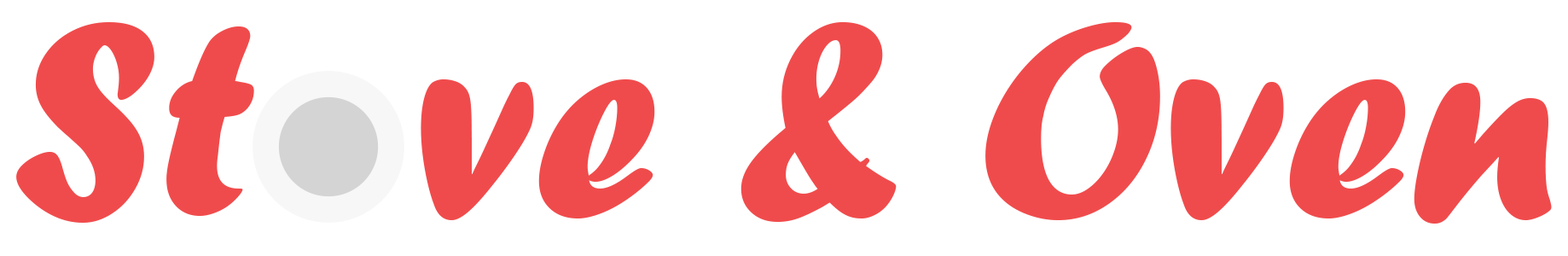
<style>
.page{position:relative;width:1568px;height:256px;background:#ffffff}
.page>*{position:absolute;margin:0}
.t1{font:291.2px "ForteMT";color:#f04b4c}
</style>
<div class="page">
<p class="t1" style="left:16px;top:22px;width:1536px;height:202px">St  ve &amp; Oven</p>
</div>
